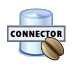
<style>
.page{position:relative;width:75px;height:66px;background:#ffffff}
.page>*{position:absolute;margin:0}
.t1{font:9px "Humanist521BT-XtraBoldCondensed";letter-spacing:0.05em;color:#000000;font-variant:small-caps}
</style>
<div class="page">
<p class="t1" style="left:10px;top:30px;width:52px;height:7px">CONNECTOR</p>
</div>
